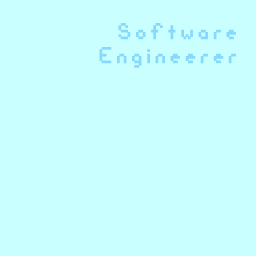
<style>
.page{position:relative;width:256px;height:256px;background:#caffff}
.page>*{position:absolute;margin:0}
.t1{font:36px/24px "BitsyButton-v2";letter-spacing:0.08em;color:#86d9fc;font-weight:bold}
</style>
<div class="page">
<p class="t1" style="left:99px;top:23px;width:137px;height:45px;text-align:right">Software<br>Engineerer</p>
</div>
